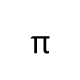
<style>
.page{position:relative;width:80px;height:80px;background:#ffffff}
.page>*{position:absolute;margin:0}
.t1{font:31.8px "DroidSans";color:#000000}
</style>
<div class="page">
<p class="t1" style="left:30px;top:36px;width:20px;height:18px">π</p>
</div>
